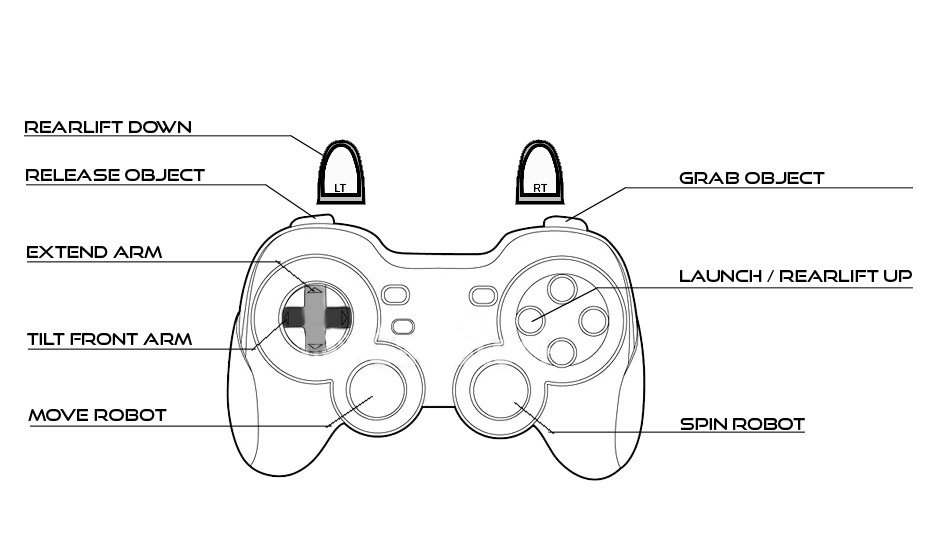
<style>
.page{position:relative;width:937px;height:542px;background:#ffffff}
.page>*{position:absolute;margin:0}
.t1{font:16.5px "GoodTimesRg-Regular";color:#000000}
</style>
<div class="page">
<p class="t1" style="left:25px;top:121px;width:166px;height:12px">RearLIFT Down</p>
<p class="t1" style="left:26px;top:169px;width:179px;height:12px">Release Object</p>
<p class="t1" style="left:679px;top:172px;width:146px;height:12px">GRab Object</p>
<p class="t1" style="left:27px;top:246px;width:135px;height:12px">Extend Arm</p>
<p class="t1" style="left:680px;top:270px;width:232px;height:12px">LauncH / RearLift Up</p>
<p class="t1" style="left:27px;top:333px;width:165px;height:12px">Tilt Front Arm</p>
<p class="t1" style="left:28px;top:409px;width:139px;height:12px">Move Robot</p>
<p class="t1" style="left:680px;top:418px;width:125px;height:12px">SPIN Robot</p>
</div>
